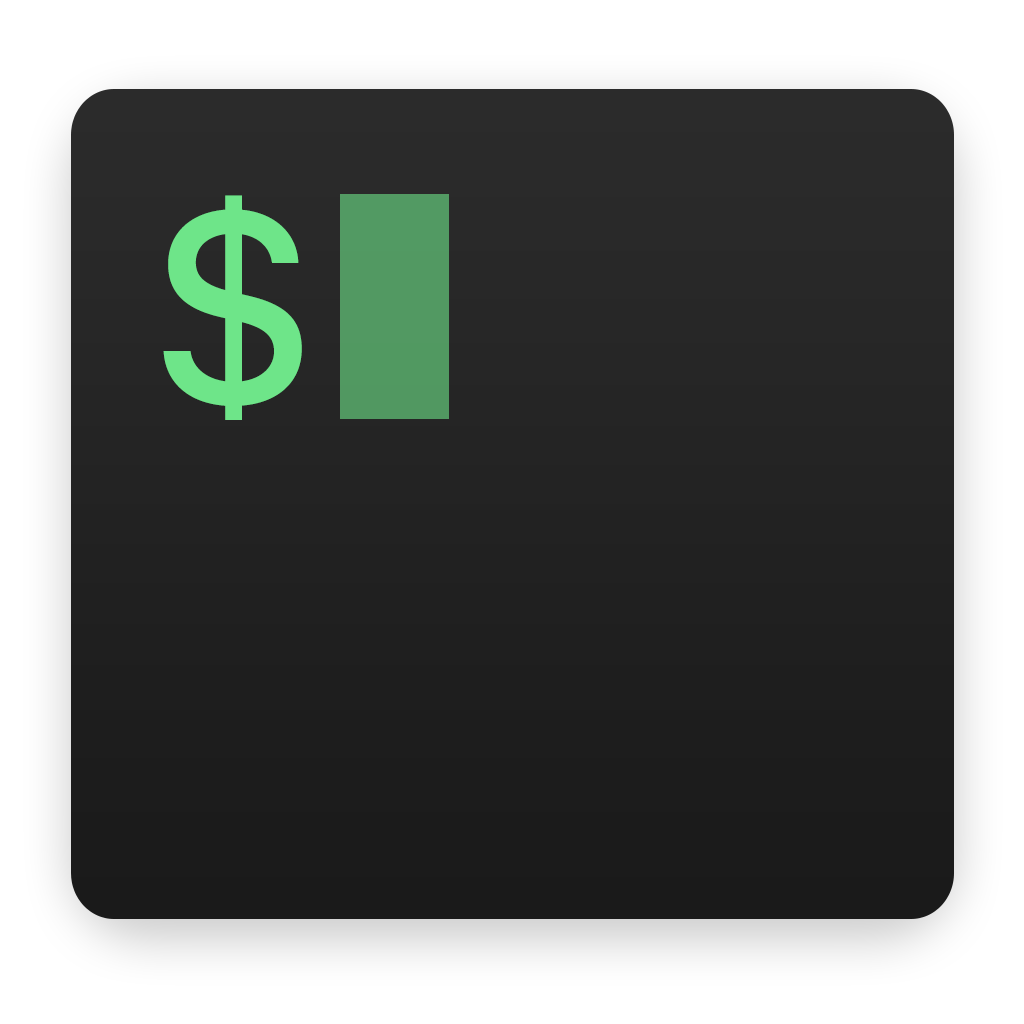
<style>
.page{position:relative;width:1024px;height:1024px}
.page>*{position:absolute;margin:0}
.t1{font:266.1px "SFMono-Semibold";color:#6ee589}
</style>
<div class="page">
<p class="t1" style="left:163px;top:195px;width:139px;height:225px">$</p>
</div>
